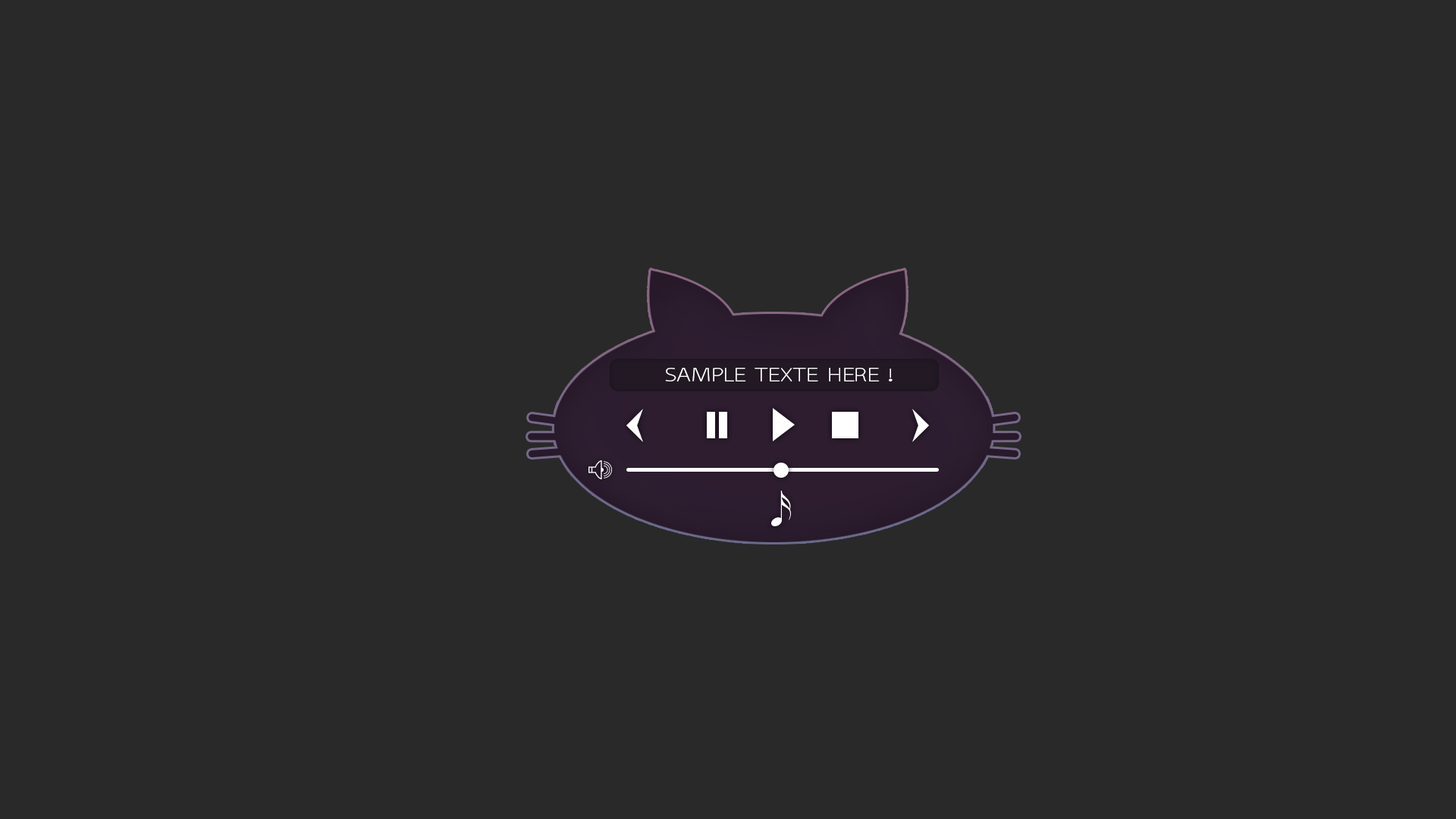
<style>
.page{position:relative;width:1456px;height:819px;background:#292929}
.page>*{position:absolute;margin:0}
.t1{font:19px "kiddySans";color:#ffffff;scale:1.27 1}
</style>
<div class="page">
<p class="t1" style="left:665px;top:368px;width:228px;height:13px">SAMPLE TEXTE HERE !</p>
</div>
